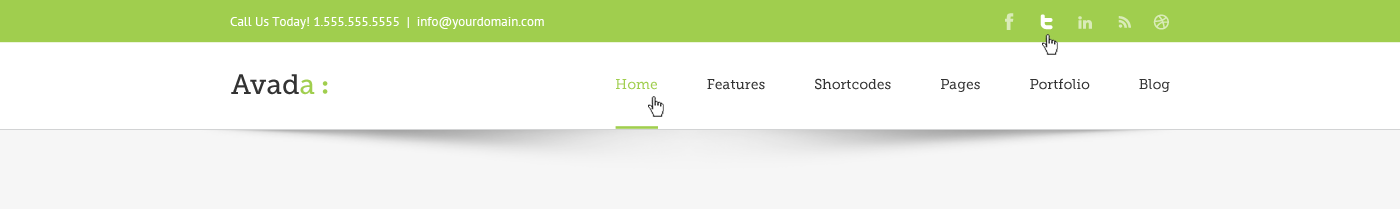
<style>
.page{position:relative;width:1400px;height:209px;background:#ffffff}
.page>*{position:absolute;margin:0}
.t1{font:13px "PTSans-Regular";color:#ffffff}
.t2{font:28px "MuseoSlab-500";color:#333333}
.t3{font:28px "MuseoSlab-500";color:#a0ce4e}
.t4{font:14px "MuseoSlab-500";color:#333333}
.t5{font:14px "MuseoSlab-500";color:#a0ce4e}
</style>
<div class="page">
<p class="t1" style="left:230px;top:17px;width:314px;height:12px">Call Us Today! 1.555.555.5555  |  info@yourdomain.com</p>
<p class="t2" style="left:231px;top:74px;width:84px;height:21px">Avad<span class="t3">a</span></p>
<p class="t4" style="left:616px;top:78px;width:554px;height:14px"><span class="t5">Home              </span>Features              Shortcodes              Pages              Portfolio              Blog</p>
</div>
